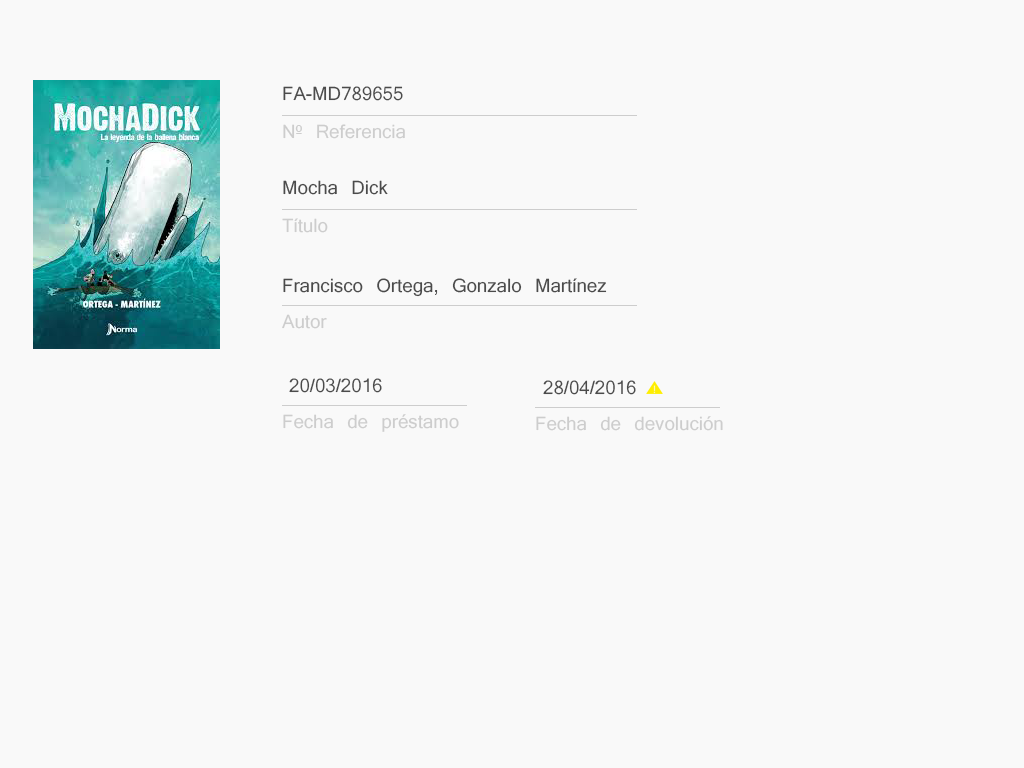
<style>
.page{position:relative;width:1024px;height:768px;background:#f9f9f9}
.page>*{position:absolute;margin:0}
.t1{font:18px "Kartika";color:#4b4b4b}
.t2{font:18px "Kartika";color:#cdcdcd}
</style>
<div class="page">
<p class="t1" style="left:283px;top:86px;width:120px;height:15px">FA-MD789655</p>
<p class="t2" style="left:283px;top:124px;width:122px;height:15px">Nº Referencia</p>
<p class="t1" style="left:283px;top:180px;width:105px;height:15px">Mocha Dick</p>
<p class="t2" style="left:282px;top:218px;width:46px;height:15px">Título</p>
<p class="t1" style="left:283px;top:278px;width:324px;height:19px">Francisco Ortega, Gonzalo Martínez</p>
<p class="t2" style="left:282px;top:314px;width:45px;height:15px">Autor</p>
<p class="t1" style="left:289px;top:378px;width:93px;height:15px">20/03/2016</p>
<p class="t1" style="left:543px;top:380px;width:93px;height:15px">28/04/2016</p>
<p class="t2" style="left:283px;top:414px;width:176px;height:18px">Fecha de préstamo</p>
<p class="t2" style="left:536px;top:416px;width:187px;height:15px">Fecha de devolución</p>
</div>
